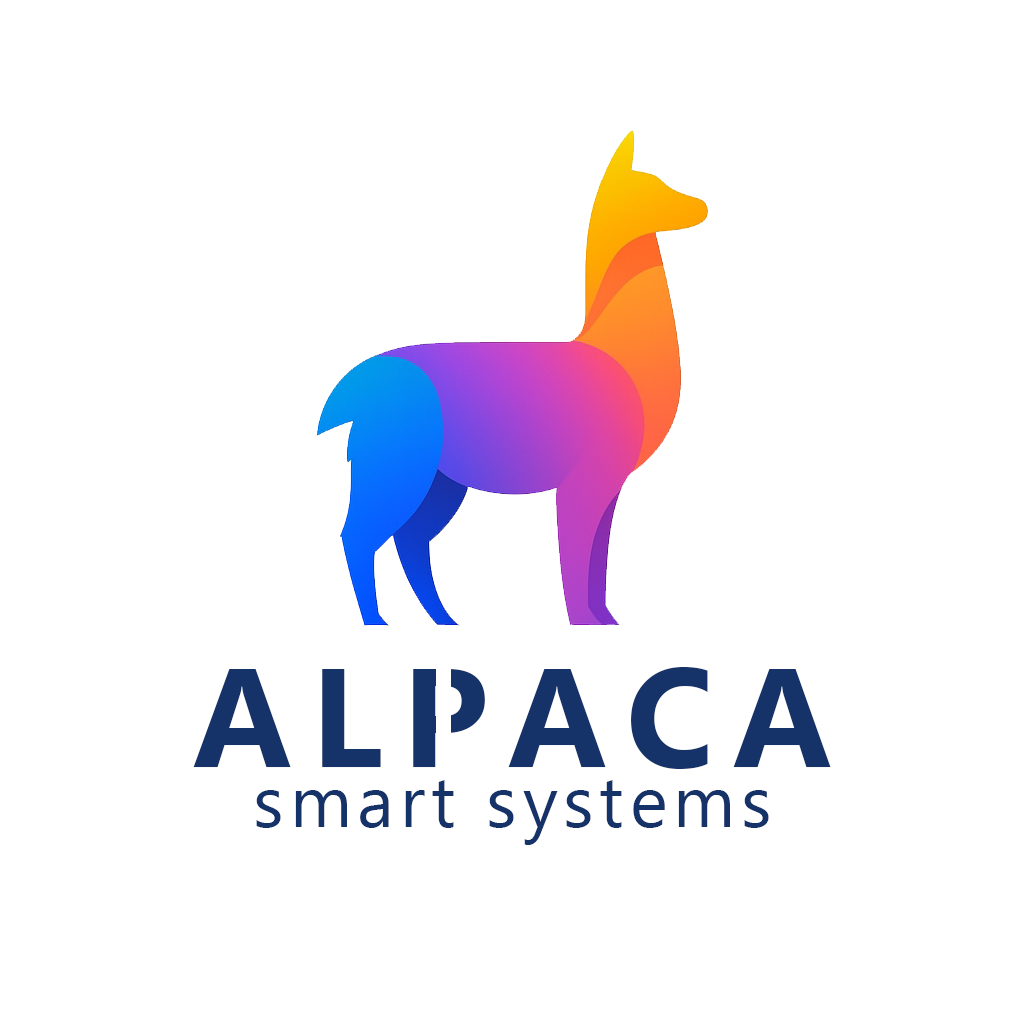
<style>
.page{position:relative;width:1024px;height:1024px;background:#ffffff}
.page>*{position:absolute;margin:0}
.t1{font:140px "MicrosoftNewTaiLue-Bold";letter-spacing:0.14em;color:#153369}
.t2{font:72px "MicrosoftNewTaiLue";letter-spacing:0.08em;color:#153369}
</style>
<div class="page">
<p class="t1" style="left:193px;top:667px;width:638px;height:102px">ALPACA</p>
<p class="t2" style="left:256px;top:780px;width:513px;height:65px">smart systems</p>
</div>
